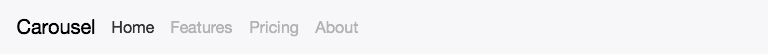
<style>
.page{position:relative;width:768px;height:54px;background:#f7f7f9}
.page>*{position:absolute;margin:0}
.t1{font:12px "MyriadPro-Regular";color:#000000}
.t2{font:12px "MyriadPro-Regular";color:#333333}
.t3{font:12px "MyriadPro-Regular";color:#b3b3b3}
</style>
<div class="page">
<p class="t1" style="left:17px;top:18px;width:78px;height:17px">Carousel</p>
<p class="t2" style="left:112px;top:21px;width:43px;height:13px">Home</p>
<p class="t3" style="left:171px;top:21px;width:62px;height:13px">Features</p>
<p class="t3" style="left:250px;top:21px;width:49px;height:16px">Pricing</p>
<p class="t3" style="left:315px;top:21px;width:44px;height:13px">About</p>
</div>
